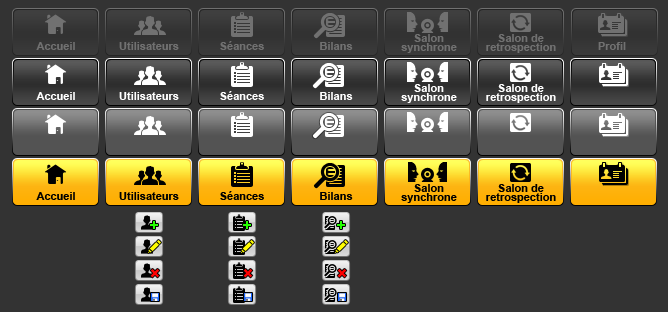
<style>
.page{position:relative;width:668px;height:312px;background:#333333}
.page>*{position:absolute;margin:0}
.t1{font:11px "Arial-BoldMT";color:#717171}
.t2{font:11px/9px "Arial-BoldMT";color:#717171}
.t3{font:11px/9px "Arial-BoldMT";color:#ffffff}
.t4{font:11px "Arial-BoldMT";color:#ffffff}
.t5{font:11px/9px "Arial-BoldMT";color:#000000}
.t6{font:11px "Arial-BoldMT";color:#000000}
.t7{font:14px "Arial-BoldMT";color:#24ff00}
.t8{font:19.3px "Arial-BoldMT";color:#ff0000}
</style>
<div class="page">
<p class="t1" style="left:220px;top:41px;width:44px;height:9px">Séances</p>
<p class="t2" style="left:401px;top:34px;width:56px;height:19px;text-align:center">Salon<br>synchrone</p>
<p class="t2" style="left:486px;top:34px;width:70px;height:19px;text-align:center">Salon de<br>retrospection</p>
<p class="t1" style="left:36px;top:42px;width:39px;height:8px">Accueil</p>
<p class="t1" style="left:119px;top:42px;width:60px;height:8px">Utilisateurs</p>
<p class="t1" style="left:320px;top:42px;width:33px;height:8px">Bilans</p>
<p class="t1" style="left:598px;top:42px;width:28px;height:8px">Profil</p>
<p class="t3" style="left:401px;top:84px;width:56px;height:19px;text-align:center">Salon<br>synchrone</p>
<p class="t3" style="left:486px;top:84px;width:70px;height:19px;text-align:center">Salon de<br>retrospection</p>
<p class="t4" style="left:36px;top:92px;width:39px;height:8px">Accueil</p>
<p class="t4" style="left:119px;top:92px;width:60px;height:8px">Utilisateurs</p>
<p class="t4" style="left:220px;top:91px;width:44px;height:9px">Séances</p>
<p class="t4" style="left:320px;top:92px;width:33px;height:8px">Bilans</p>
<p class="t5" style="left:401px;top:184px;width:56px;height:19px;text-align:center">Salon<br>synchrone</p>
<p class="t5" style="left:486px;top:184px;width:70px;height:19px;text-align:center">Salon de<br>retrospection</p>
<p class="t6" style="left:36px;top:192px;width:39px;height:8px">Accueil</p>
<p class="t6" style="left:119px;top:192px;width:60px;height:8px">Utilisateurs</p>
<p class="t6" style="left:220px;top:191px;width:44px;height:9px">Séances</p>
<p class="t6" style="left:320px;top:192px;width:33px;height:8px">Bilans</p>
<p class="t7" style="left:150px;top:221px;width:8px;height:8px">+</p>
<p class="t7" style="left:243px;top:221px;width:8px;height:8px">+</p>
<p class="t7" style="left:337px;top:221px;width:8px;height:8px">+</p>
<p class="t8" style="left:150px;top:269px;width:10px;height:9px;rotate:-45deg">+</p>
<p class="t8" style="left:243px;top:269px;width:10px;height:9px;rotate:-45deg">+</p>
<p class="t8" style="left:337px;top:269px;width:10px;height:9px;rotate:-45deg">+</p>
</div>
